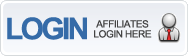
<style>
.page{position:relative;width:188px;height:56px}
.page>*{position:absolute;margin:0}
.t1{font:30px "Arial-BoldMT";letter-spacing:-0.09em;color:#356ba8}
.t2{font:10px/10px "ArialMT";letter-spacing:-0.04em;color:#444444}
</style>
<div class="page">
<p class="t1" style="left:7px;top:17px;width:80px;height:23px">LOGIN</p>
<p class="t2" style="left:94px;top:20px;width:58px;height:18px;text-align:center">AFFILIATES<br>LOGIN HERE</p>
</div>
